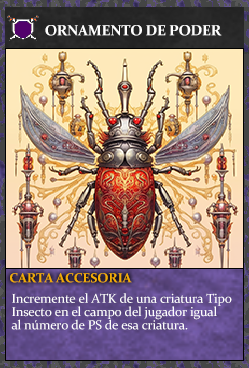
<style>
.page{position:relative;width:249px;height:368px}
.page>*{position:absolute;margin:0}
.t1{font:14.7px "Constantia-Bold";letter-spacing:-0.02em;color:#ffffff}
.t2{font:13.3px "Constantia-Bold";letter-spacing:-0.02em;color:#f2ac05}
.t3{font:13.1px/13.3px "Constantia";letter-spacing:-0.02em;color:#ffffff}
</style>
<div class="page">
<p class="t1" style="left:45px;top:25px;width:177px;height:11px">ORNAMENTO DE PODER</p>
<p class="t2" style="left:10px;top:273px;width:122px;height:10px">CARTA ACCESORIA</p>
<p class="t3" style="left:11px;top:293px;width:221px;height:37px">Incremente el ATK de una criatura Tipo<br>Insecto en el campo del jugador igual<br>al número de PS de esa criatura.</p>
</div>
